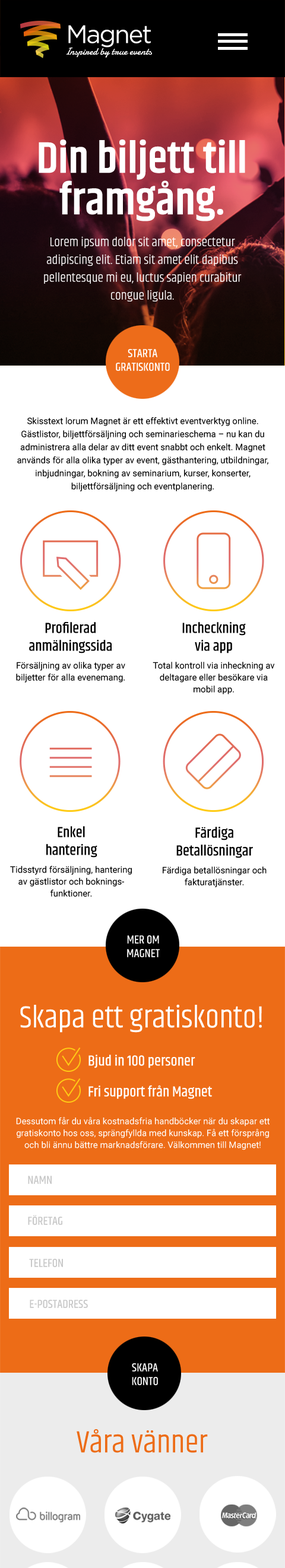
<style>
.page{position:relative;width:285px;height:1568px;background:#ffffff}
.page>*{position:absolute;margin:0}
.t1{font:44.5px/41.5px "Khand-Semibold";color:#ffffff}
.t2{font:13.1px/17.8px "Khand-Regular";color:#ffffff}
.t3{font:11.9px/13.7px "Khand-Medium";color:#ffffff;text-transform:uppercase}
.t4{font:8.9px/13.1px "Roboto-Regular";color:#000000}
.t5{font:8.9px/11.9px "Roboto-Regular";color:#000000}
.t6{font:14.8px/14.8px "Khand-Medium";color:#000000}
.t7{font:14.8px/17.8px "Khand-Medium";color:#000000}
.t8{font:8.9px/17.8px "Roboto-Regular";color:#000000}
.t9{font:8.9px/14.8px "Roboto-Regular";color:#000000}
.t10{font:31.5px "Khand-Regular";color:#ffffff}
.t11{font:14.8px "Khand-Medium";color:#ffffff}
.t12{font:8.9px/11.9px "Roboto-Regular";color:#ffffff}
.t13{font:11.9px "Khand-Medium";color:#c8c8c8;text-transform:uppercase}
.t14{font:31.5px "Khand-Regular";color:#ed6c17}
</style>
<div class="page">
<p class="t1" style="left:39px;top:139px;width:206px;height:82px;text-align:center">Din biljett till <br>framgång.</p>
<p class="t2" style="left:44px;top:236px;width:198px;height:65px;text-align:center">Lorem ipsum dolor sit amet, consectetur adipiscing elit. Etiam sit amet elit dapibus pellentesque mi eu, luctus sapien curabitur congue ligula.</p>
<p class="t3" style="left:116px;top:349px;width:54px;height:22px;text-align:center">Starta<br>gratiskonto</p>
<p class="t4" style="left:17px;top:417px;width:251px;height:74px;text-align:center">Skisstext lorum Magnet är ett effektivt eventverktyg online. <br>Gästlistor, biljettförsäljning och seminarieschema – nu kan du administrera alla delar av ditt event snabbt och enkelt. Magnet används för alla olika typer av event, gästhantering, utbildningar, inbjudningar, bokning av seminarium, kurser, konserter, <br>biljettförsäljning och eventplanering.</p>
<p class="t5" style="left:16px;top:622px;width:109px;height:61px;text-align:center"><span class="t6">Profilerad <br></span><span class="t7">anmälningssida<br></span><span class="t8">Fö</span><span class="t9">rsäljning av olika typer av <br></span>biljetter för alla evenemang.</p>
<p class="t5" style="left:153px;top:622px;width:122px;height:72px;text-align:center"><span class="t6">Incheckning <br></span><span class="t7">via app<br></span><span class="t8">Total kontroll via inheckning av <br></span>deltagare eller besökare via mobil app.</p>
<p class="t5" style="left:10px;top:826px;width:122px;height:71px;text-align:center"><span class="t6">Enkel <br></span><span class="t7">hantering<br></span><span class="t8">Ti</span>dsstyrd försäljning, hantering av gästlistor och boknings-<br>funktioner.</p>
<p class="t8" style="left:163px;top:827px;width:103px;height:60px;text-align:center"><span class="t6">Färdiga<br></span><span class="t7">Betallösningar<br></span>Färdiga betallösningar och <br><span class="t5">fakturatjänster.</span></p>
<p class="t3" style="left:127px;top:935px;width:33px;height:22px;text-align:center">mer om <br>Magnet</p>
<p class="t10" style="left:20px;top:1004px;width:242px;height:29px">Skapa ett gratiskonto!</p>
<p class="t11" style="left:88px;top:1055px;width:107px;height:13px">Bjud in 100 personer</p>
<p class="t11" style="left:88px;top:1085px;width:124px;height:14px">Fri support från Magnet</p>
<p class="t12" style="left:16px;top:1117px;width:253px;height:33px;text-align:center">Dessutom får du våra kostnadsfria handböcker när du skapar ett gratiskonto hos oss, sprängfyllda med kunskap. Få ett försprång och bli ännu bättre marknadsförare. Välkommen till Magnet!</p>
<p class="t13" style="left:28px;top:1176px;width:24px;height:8px">Namn</p>
<p class="t13" style="left:28px;top:1215px;width:34px;height:10px">Företag</p>
<p class="t13" style="left:29px;top:1259px;width:34px;height:8px">Telefon</p>
<p class="t13" style="left:30px;top:1300px;width:58px;height:8px">E-postadress</p>
<p class="t3" style="left:132px;top:1363px;width:26px;height:22px;text-align:center">SKAPA<br>KONTO</p>
<p class="t14" style="left:77px;top:1429px;width:131px;height:24px">Våra vänner</p>
</div>
